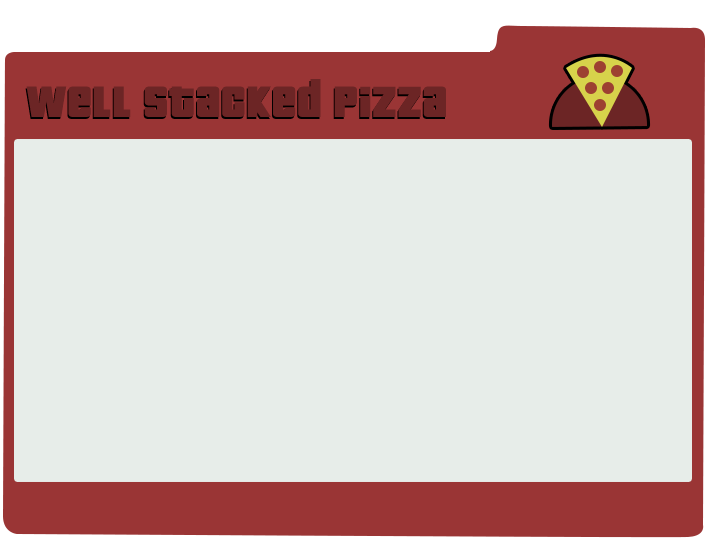
<style>
.page{position:relative;width:715px;height:540px;background:#e7ede9}
.page>*{position:absolute;margin:0}
.t1{font:60px "Pricedown";letter-spacing:0.01em;color:#6c2525}
</style>
<div class="page">
<p class="t1" style="left:26px;top:79px;width:420px;height:38px">well stacked pizza</p>
</div>
